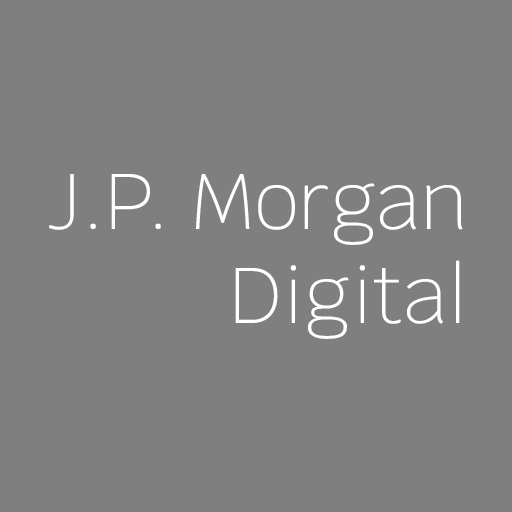
<style>
.page{position:relative;width:512px;height:512px;background:#7f7f7f}
.page>*{position:absolute;margin:0}
.t1{font:78.7px "Krub-ExtraLight";color:#ffffff}
</style>
<div class="page">
<p class="t1" style="left:49px;top:174px;width:414px;height:165px;text-align:right">J.P. Morgan<br>Digital</p>
</div>
